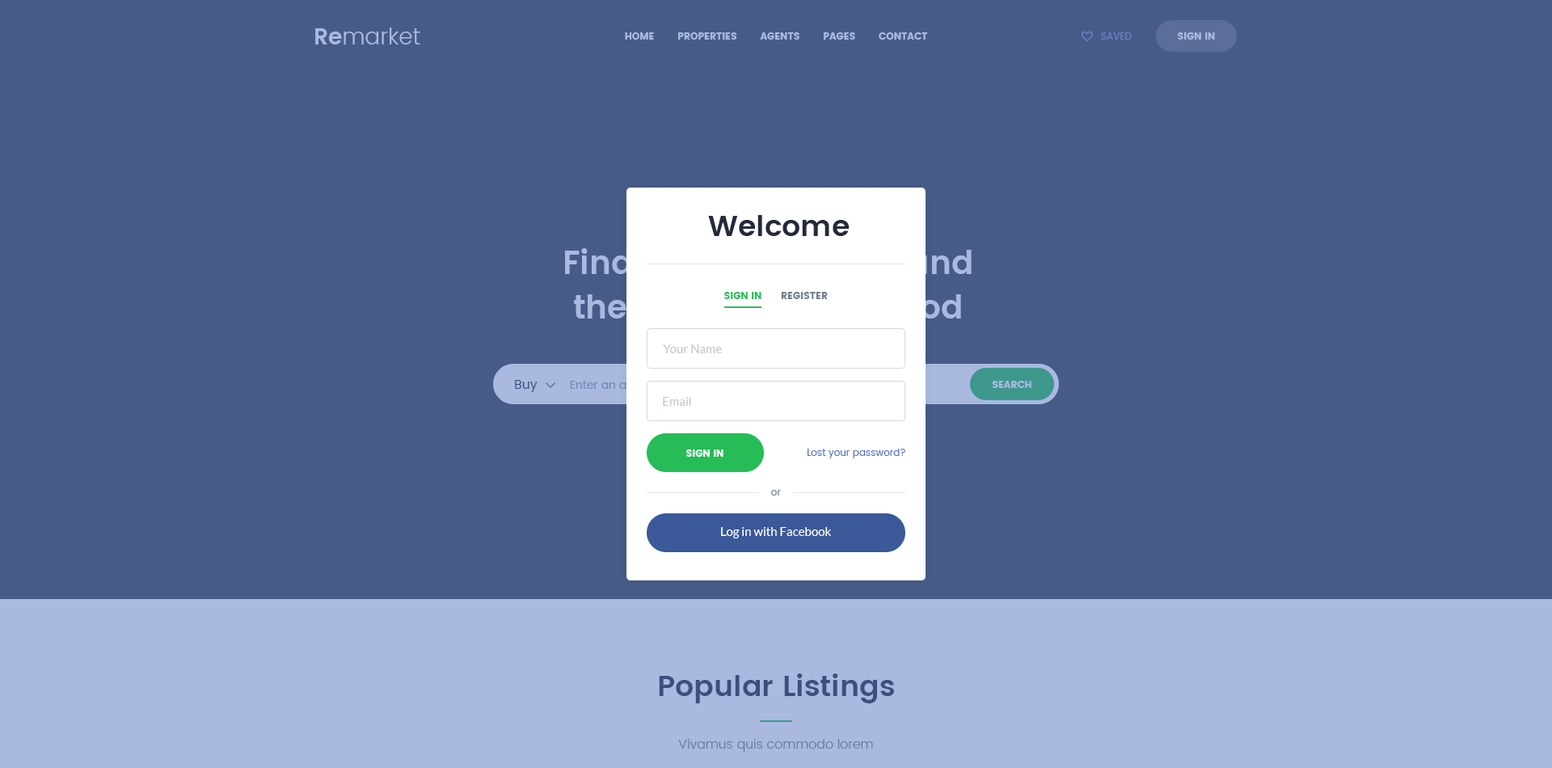
<style>
.page{position:relative;width:1552px;height:768px;background:#475b89}
.page>*{position:absolute;margin:0}
.t1{font:22.6px "Poppins-Light";color:#aab9df}
.t2{font:22.6px "Poppins-SemiBold";color:#aab9df}
.t3{font:9.7px "Poppins";color:#aab9df;text-transform:uppercase}
.t4{font:9.7px "Poppins-Regular";color:#7b95cd;text-transform:uppercase}
.t5{font:29.1px "Poppins-SemiBold";color:#242a3a}
.t6{font:9.7px "Poppins";color:#26bc58;text-transform:uppercase}
.t7{font:9.7px "Poppins";color:#727f90;text-transform:uppercase}
.t8{font:12.1px "Lato-Regular";color:#c3c7cc}
.t9{font:12.9px "Poppins-Regular";color:#3d4f7d}
.t10{font:9.7px "Poppins";color:#ffffff;text-transform:uppercase}
.t11{font:9.7px "Poppins-Regular";color:#5574bf}
.t12{font:9.7px "Poppins-Regular";color:#727f90}
.t13{font:12.1px "Lato-Regular";color:#ffffff}
.t14{font:29.1px "Poppins-SemiBold";color:#3d4f7d}
.t15{font:12.9px "Poppins-Light";color:#6778a0}
</style>
<div class="page">
<p class="t1" style="left:315px;top:27px;width:105px;height:17px"><span class="t2">Re</span>market</p>
<p class="t3" style="left:625px;top:32px;width:303px;height:8px">Home        Properties        Agents        Pages        Contact</p>
<p class="t4" style="left:1101px;top:32px;width:31px;height:8px">Saved</p>
<p class="t3" style="left:1178px;top:32px;width:37px;height:8px">Sign In</p>
<p class="t5" style="left:708px;top:215px;width:142px;height:21px">Welcome</p>
<p class="t6" style="left:724px;top:292px;width:38px;height:7px">Sign In</p>
<p class="t7" style="left:781px;top:292px;width:47px;height:7px">Register</p>
<p class="t8" style="left:663px;top:344px;width:59px;height:9px">Your Name</p>
<p class="t9" style="left:515px;top:380px;width:23px;height:12px">Buy</p>
<p class="t3" style="left:992px;top:381px;width:40px;height:7px">Search</p>
<p class="t8" style="left:663px;top:397px;width:28px;height:9px">Email</p>
<p class="t10" style="left:686px;top:450px;width:38px;height:7px">Sign In</p>
<p class="t11" style="left:808px;top:449px;width:98px;height:9px">Lost your password?</p>
<p class="t12" style="left:771px;top:490px;width:10px;height:6px">or</p>
<p class="t13" style="left:721px;top:527px;width:110px;height:11px">Log in with Facebook</p>
<p class="t14" style="left:659px;top:674px;width:235px;height:29px">Popular Listings</p>
<p class="t15" style="left:678px;top:739px;width:195px;height:13px">Vivamus quis commodo lorem</p>
</div>
